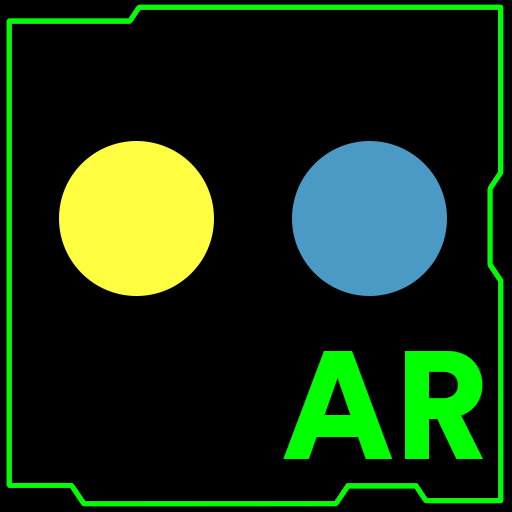
<style>
.page{position:relative;width:512px;height:512px;background:#000000}
.page>*{position:absolute;margin:0}
.t1{font:152px "CircularStd-Black";color:#00ff00}
</style>
<div class="page">
<p class="t1" style="left:283px;top:351px;width:200px;height:108px">AR</p>
</div>
